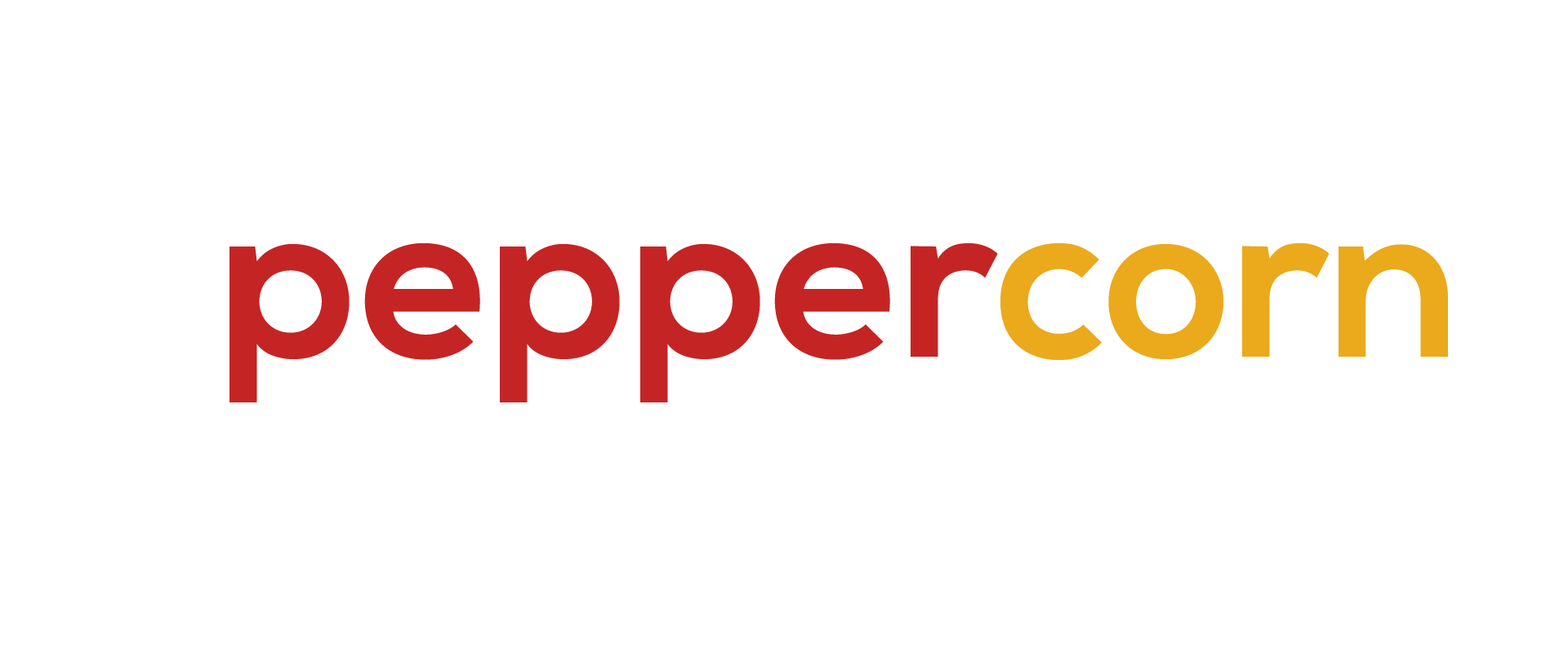
<style>
.page{position:relative;width:1568px;height:653px;background:#ffffff}
.page>*{position:absolute;margin:0}
.t1{font:223.8px "NexaBold";color:#c52424}
.t2{font:223.8px "NexaBold";color:#eba91c}
</style>
<div class="page">
<p class="t1" style="left:229px;top:243px;width:1219px;height:160px">pepper<span class="t2">corn</span></p>
</div>
